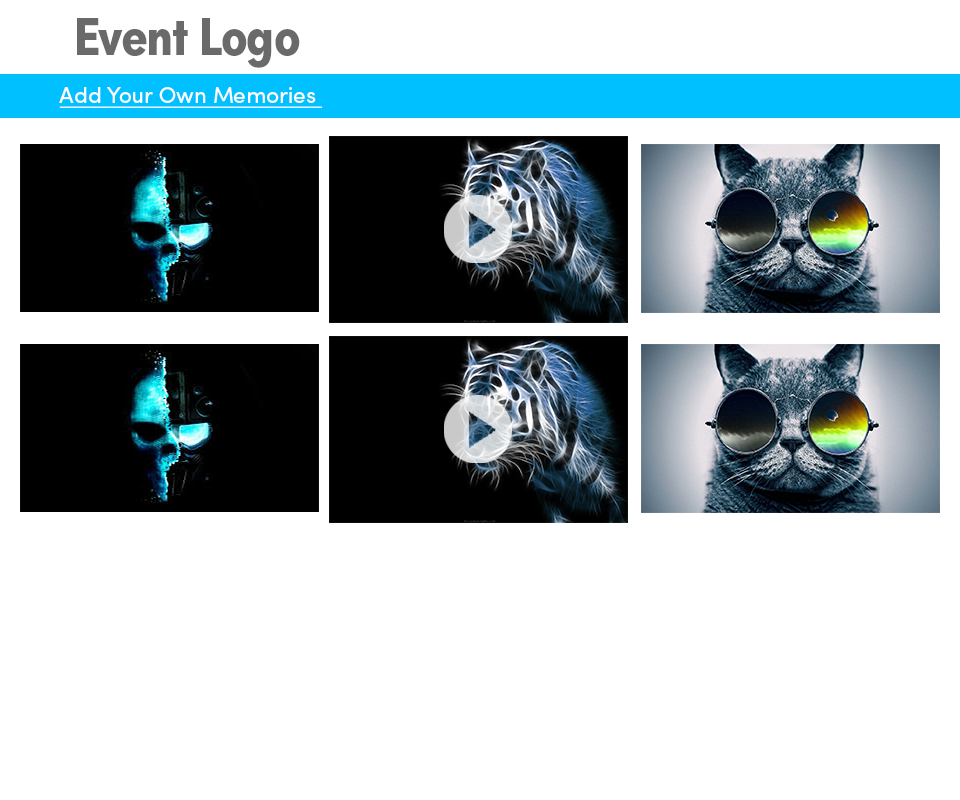
<style>
.page{position:relative;width:960px;height:800px;background:#ffffff}
.page>*{position:absolute;margin:0}
.t1{font:54.2px "SofiaProBoldCondensed";letter-spacing:-0.02em;color:#6a6a6a}
.t2{font:22.6px "SofiaProRegular";color:#ffffff;text-decoration:underline}
</style>
<div class="page">
<p class="t1" style="left:77px;top:18px;width:223px;height:50px">Event Logo</p>
<p class="t2" style="left:59px;top:87px;width:264px;height:21px">Add Your Own Memories</p>
</div>
